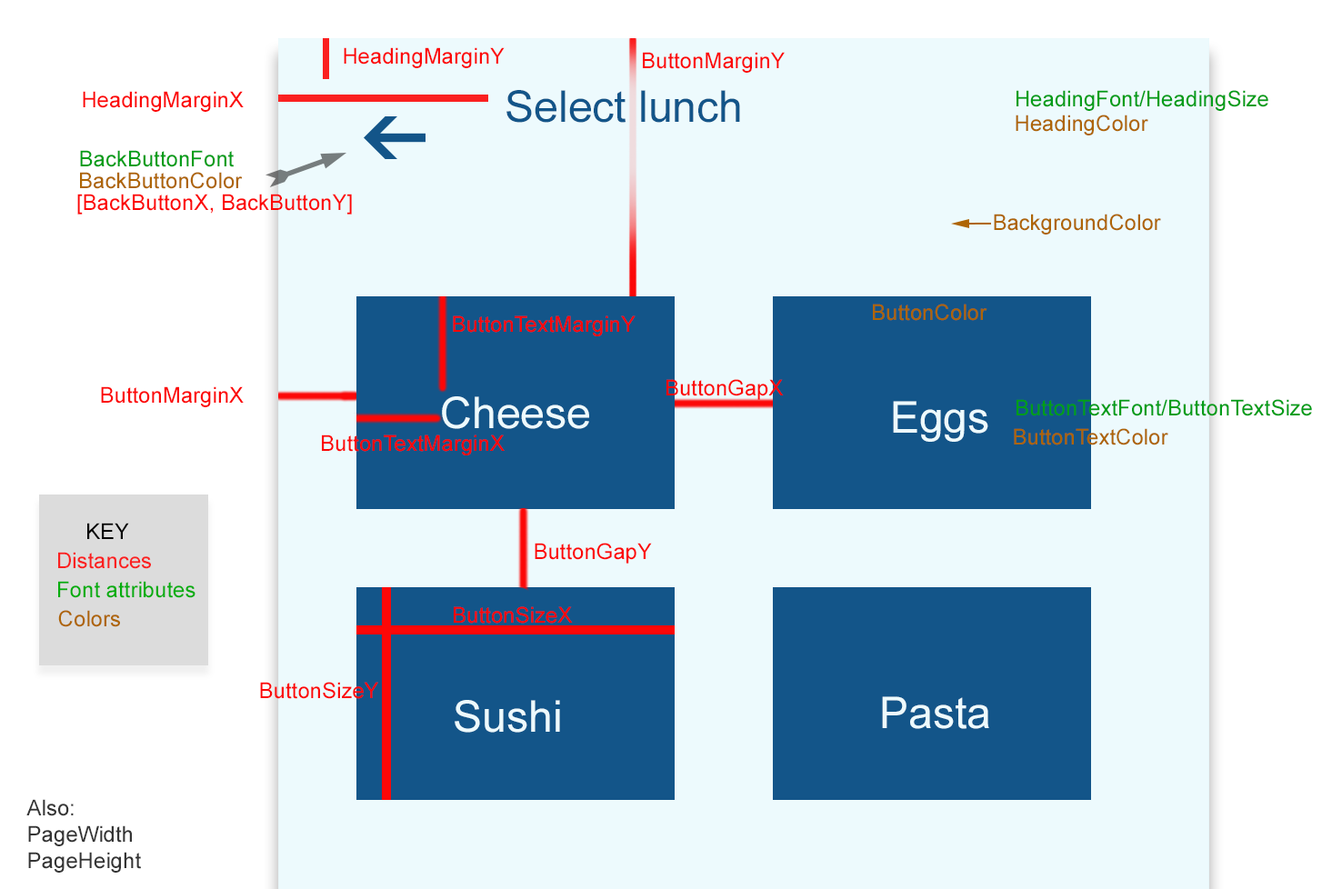
<style>
.page{position:relative;width:1342px;height:889px;background:#edfafd}
.page>*{position:absolute;margin:0}
.t1{font:21.8px "ArialMT";color:#fc0707}
.t2{font:43.6px "ArialMT";color:#135589}
.t3{font:21.8px "ArialMT";color:#039d18}
.t4{font:21.8px "ArialMT";color:#ae6505}
.t5{font:43.6px "ArialMT";color:#edfafd}
.t6{font:21.8px "ArialMT";color:#000000}
.t7{font:21.8px "ArialMT";color:#fa2020}
.t8{font:21.8px "ArialMT";color:#05ad0e}
.t9{font:21.8px "ArialMT";color:#343434}
</style>
<div class="page">
<p class="t1" style="left:344px;top:47px;width:160px;height:21px">HeadingMarginY</p>
<p class="t1" style="left:643px;top:52px;width:141px;height:21px">ButtonMarginY</p>
<p class="t2" style="left:506px;top:90px;width:234px;height:33px">Select lunch</p>
<p class="t3" style="left:1016px;top:90px;width:252px;height:21px">HeadingFont/HeadingSize</p>
<p class="t1" style="left:83px;top:91px;width:161px;height:21px">HeadingMarginX</p>
<p class="t4" style="left:1015px;top:115px;width:133px;height:20px">HeadingColor</p>
<p class="t3" style="left:80px;top:150px;width:154px;height:17px">BackButtonFont</p>
<p class="t4" style="left:80px;top:172px;width:163px;height:17px">BackButtonColor</p>
<p class="t1" style="left:77px;top:194px;width:275px;height:20px">[BackButtonX, BackButtonY]</p>
<p class="t4" style="left:993px;top:214px;width:168px;height:20px">BackgroundColor</p>
<p class="t4" style="left:873px;top:304px;width:114px;height:17px">ButtonColor</p>
<p class="t1" style="left:453px;top:315px;width:182px;height:21px">ButtonTextMarginY</p>
<p class="t1" style="left:101px;top:386px;width:143px;height:21px">ButtonMarginX</p>
<p class="t1" style="left:666px;top:379px;width:117px;height:21px">ButtonGapX</p>
<p class="t5" style="left:442px;top:396px;width:147px;height:33px">Cheese</p>
<p class="t5" style="left:893px;top:401px;width:95px;height:41px">Eggs</p>
<p class="t3" style="left:1016px;top:399px;width:296px;height:17px">ButtonTextFont/ButtonTextSize</p>
<p class="t1" style="left:322px;top:434px;width:182px;height:21px">ButtonTextMarginX</p>
<p class="t4" style="left:1013px;top:428px;width:155px;height:17px">ButtonTextColor</p>
<p class="t6" style="left:87px;top:523px;width:42px;height:16px">KEY</p>
<p class="t1" style="left:534px;top:543px;width:118px;height:21px">ButtonGapY</p>
<p class="t7" style="left:58px;top:552px;width:93px;height:17px">Distances</p>
<p class="t8" style="left:58px;top:581px;width:137px;height:17px">Font attributes</p>
<p class="t4" style="left:58px;top:610px;width:62px;height:17px">Colors</p>
<p class="t1" style="left:454px;top:606px;width:119px;height:17px">ButtonSizeX</p>
<p class="t1" style="left:260px;top:682px;width:118px;height:17px">ButtonSizeY</p>
<p class="t5" style="left:454px;top:700px;width:106px;height:33px">Sushi</p>
<p class="t5" style="left:882px;top:696px;width:107px;height:33px">Pasta</p>
<p class="t9" style="left:26px;top:799px;width:115px;height:74px">Also:<br>PageWidth<br>PageHeight</p>
</div>
